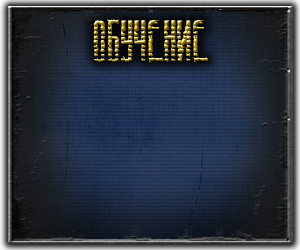
<style>
.page{position:relative;width:300px;height:250px}
.page>*{position:absolute;margin:0}
.t1{font:54.2px "AmazS.T.A.L.K.E.R.v.3.0"}
</style>
<div class="page">
<p class="t1" style="left:90px;top:19px;width:119px;height:44px">Обучение</p>
<p class="t1" style="left:90px;top:19px;width:119px;height:44px">Обучение</p>
</div>
